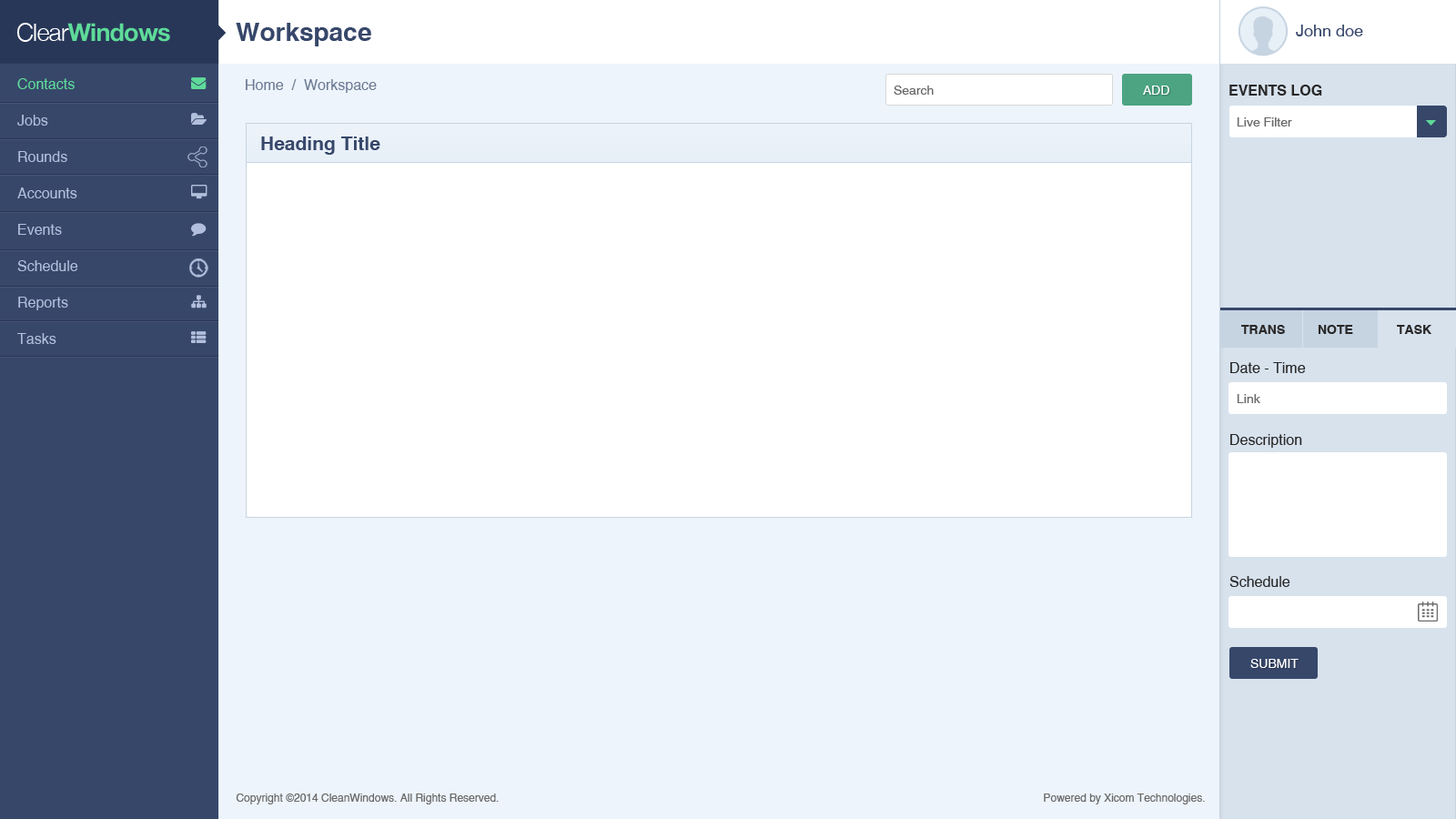
<style>
.page{position:relative;width:1456px;height:819px;background:#ffffff}
.page>*{position:absolute;margin:0}
.t1{font:24.6px "HelveticaNeue-Bold";letter-spacing:-0.03em;color:#5edb99}
.t2{font:24.6px "HelveticaNeue-Light";letter-spacing:-0.03em;color:#ffffff}
.t3{font:25.5px "HelveticaCE-Bold";color:#37476a}
.t4{font:16.4px "HelveticaCE-Regular";color:#37476a}
.t5{font:14.6px/36.4px "HelveticaCE-Regular";color:#b2bfdc}
.t6{font:14.6px/36.4px "HelveticaCE-Regular";color:#5edb99}
.t7{font:14.6px "HelveticaCE-Regular";color:#6d7b95}
.t8{font:12.7px "HelveticaCE-Regular";color:#696969}
.t9{font:12.7px "HelveticaCE-Regular";color:#ffffff;text-transform:uppercase}
.t10{font:14.6px "HelveticaCE-Bold";color:#292828;text-transform:uppercase}
.t11{font:19.1px "HelveticaCE-Bold";color:#37476a}
.t12{font:12.7px "HelveticaCE-Bold";color:#292828;text-transform:uppercase}
.t13{font:14.6px "HelveticaCE-Regular";color:#292828}
.t14{font:10.9px "HelveticaCE-Regular";color:#696969}
</style>
<div class="page">
<p class="t1" style="left:16px;top:23px;width:154px;height:19px"><span class="t2">Clear</span>Windows</p>
<p class="t3" style="left:236px;top:23px;width:135px;height:23px">Workspace</p>
<p class="t4" style="left:1296px;top:25px;width:67px;height:11px">John doe</p>
<p class="t5" style="left:17px;top:78px;width:61px;height:266px"><span class="t6">Contacts<br></span>Jobs<br>Rounds<br>Accounts<br>Events<br>Schedule<br>Reports<br>Tasks</p>
<p class="t7" style="left:246px;top:79px;width:131px;height:14px">Home  /  Workspace</p>
<p class="t8" style="left:894px;top:86px;width:40px;height:9px">Search</p>
<p class="t9" style="left:1143px;top:86px;width:26px;height:9px">Add</p>
<p class="t10" style="left:1229px;top:85px;width:93px;height:11px">Events Log</p>
<p class="t8" style="left:1237px;top:117px;width:55px;height:9px">Live Filter</p>
<p class="t11" style="left:261px;top:136px;width:119px;height:19px">Heading Title</p>
<p class="t12" style="left:1241px;top:325px;width:44px;height:9px">trans</p>
<p class="t12" style="left:1318px;top:325px;width:35px;height:9px">Note</p>
<p class="t12" style="left:1397px;top:325px;width:34px;height:9px">Task</p>
<p class="t13" style="left:1230px;top:362px;width:76px;height:11px">Date - Time</p>
<p class="t8" style="left:1237px;top:394px;width:23px;height:9px">Link</p>
<p class="t13" style="left:1230px;top:434px;width:72px;height:14px">Description</p>
<p class="t13" style="left:1229px;top:576px;width:61px;height:11px">Schedule</p>
<p class="t9" style="left:1250px;top:659px;width:49px;height:9px">Submit</p>
<p class="t14" style="left:236px;top:794px;width:263px;height:10px">Copyright ©2014 CleanWindows. All Rights Reserved.</p>
<p class="t14" style="left:1044px;top:794px;width:161px;height:10px">Powered by Xicom Technologies.</p>
</div>
